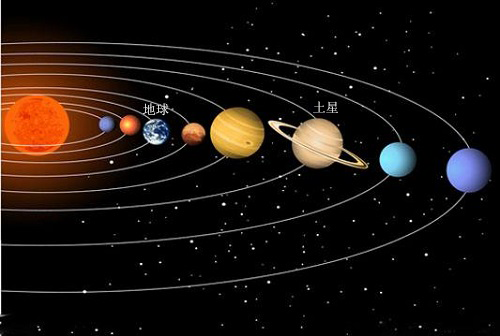
<style>
.page{position:relative;width:500px;height:336px;background:#000000}
.page>*{position:absolute;margin:0}
.t1{font:13.3px "SimSun"}
.t2{font:13.3px "SimSun";color:#ffffff}
</style>
<div class="page">
<p class="t1" style="left:313px;top:101px;width:25px;height:12px">土星</p>
<p class="t2" style="left:143px;top:103px;width:26px;height:13px">地球</p>
</div>
